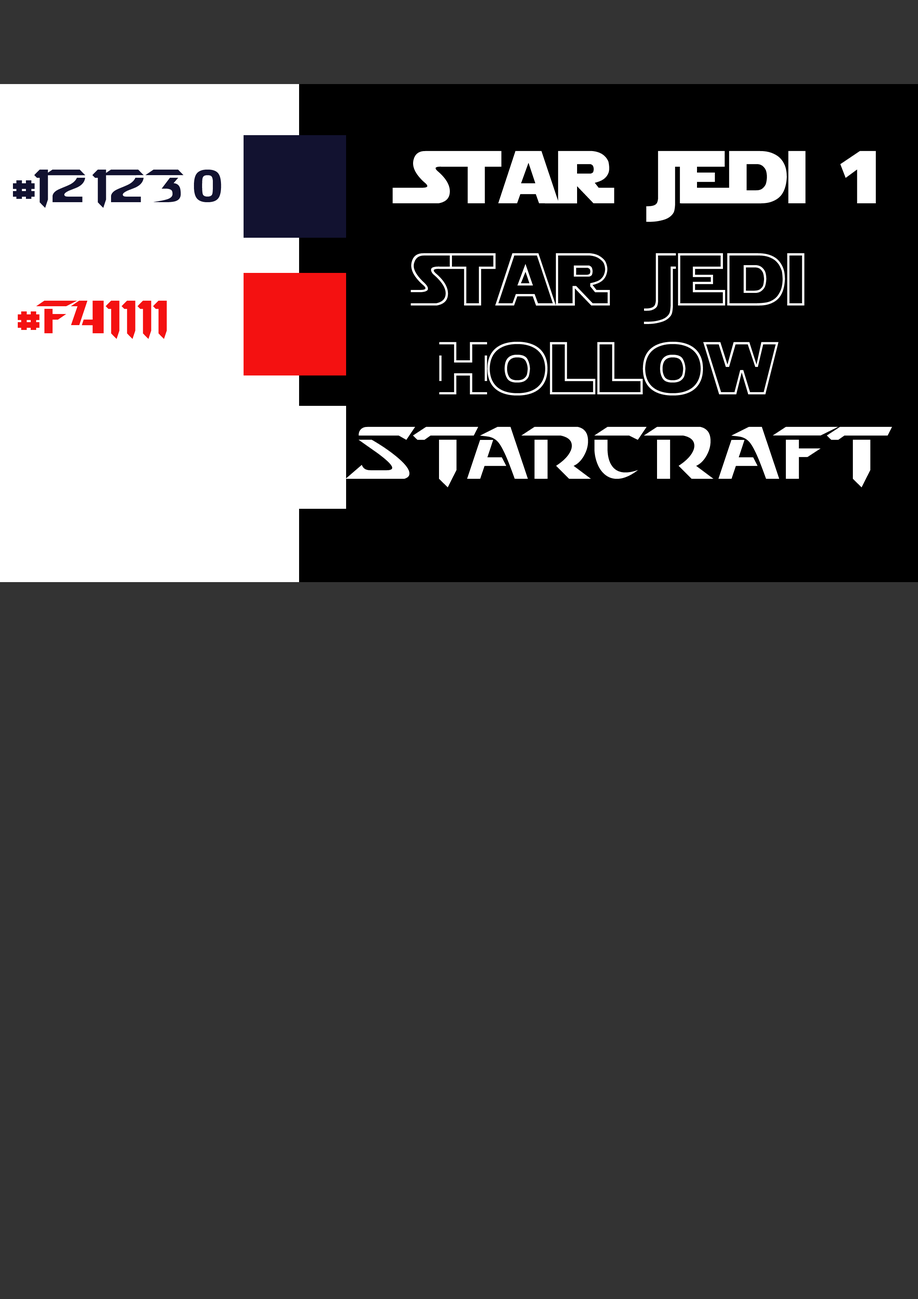
<style>
.page{position:relative;width:918px;height:1299px;background:#333333}
.page>*{position:absolute;margin:0}
.t1{font:74px "StarJedi";color:#ffffff}
.t2{font:46.3px "StarcraftNormal";color:#121230}
.t3{font:74px "StarJediHollow";color:#ffffff}
.t4{font:46.3px "StarcraftNormal";color:#f41111}
.t5{font:74px "StarcraftNormal";color:#ffffff}
</style>
<div class="page">
<p class="t1" style="left:392px;top:151px;width:484px;height:71px">Star Jedi 1</p>
<p class="t2" style="left:13px;top:170px;width:208px;height:38px">#121230</p>
<p class="t3" style="left:411px;top:253px;width:393px;height:142px;text-align:center">Star Jedi<br>Hollow</p>
<p class="t4" style="left:18px;top:301px;width:149px;height:38px">#f41111</p>
<p class="t5" style="left:345px;top:426px;width:547px;height:61px">Starcraft</p>
</div>
